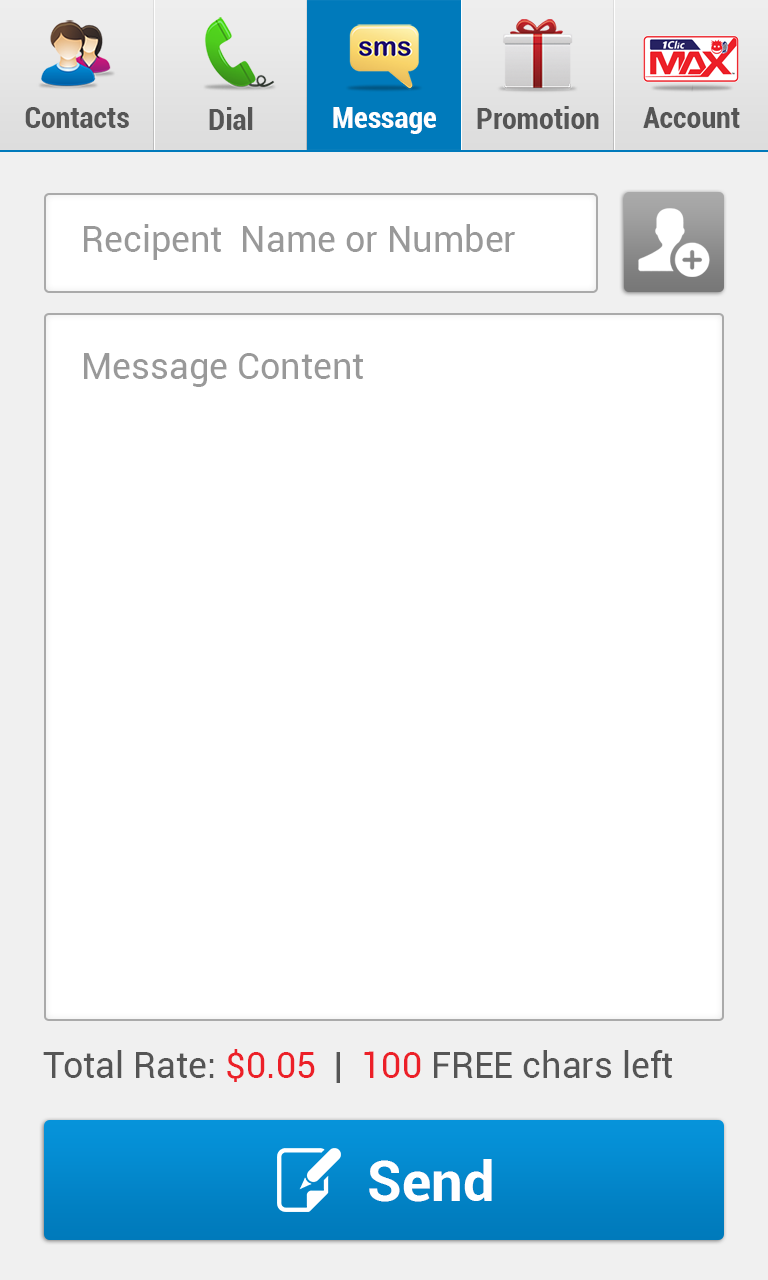
<style>
.page{position:relative;width:768px;height:1280px;background:#ffffff}
.page>*{position:absolute;margin:0}
.t1{font:30px "Roboto-BoldCondensed";color:#555555}
.t2{font:30px "Roboto-BoldCondensed";color:#ffffff}
.t3{font:36px "Roboto-Regular";color:#999999}
.t4{font:36px "Roboto-Regular";color:#555555}
.t5{font:36px "Roboto-Regular";color:#ec2028}
.t6{font:56px "Roboto-Bold";color:#ffffff}
</style>
<div class="page">
<p class="t1" style="left:25px;top:107px;width:104px;height:21px">Contacts</p>
<p class="t1" style="left:209px;top:107px;width:44px;height:23px">Dial</p>
<p class="t2" style="left:333px;top:107px;width:103px;height:27px">Message</p>
<p class="t1" style="left:477px;top:106px;width:122px;height:23px">Promotion</p>
<p class="t1" style="left:643px;top:107px;width:97px;height:21px">Account</p>
<p class="t3" style="left:84px;top:224px;width:431px;height:36px">Recipent  Name or Number</p>
<p class="t3" style="left:84px;top:353px;width:280px;height:34px">Message Content</p>
<p class="t4" style="left:43px;top:1049px;width:630px;height:34px">Total Rate: <span class="t5">$0.05</span>  |  <span class="t5">100</span> FREE chars left</p>
<p class="t6" style="left:369px;top:1159px;width:123px;height:43px">Send</p>
</div>
